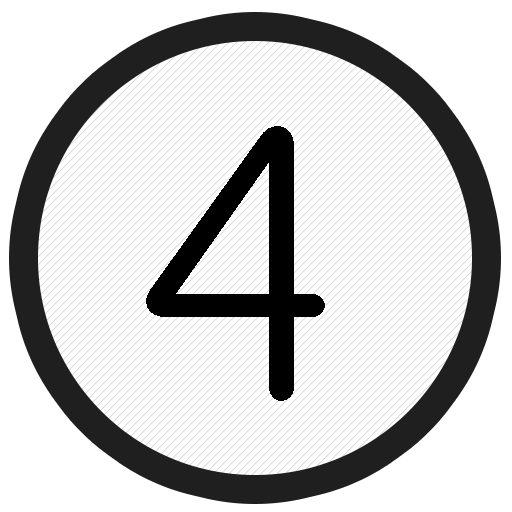
<style>
.page{position:relative;width:512px;height:512px;background:#ffffff}
.page>*{position:absolute;margin:0}
.t1{font:390.4px "VisbyRoundCF-Medium";letter-spacing:0.1em;color:#000000}
</style>
<div class="page">
<p class="t1" style="left:146px;top:126px;width:179px;height:275px">4</p>
</div>
